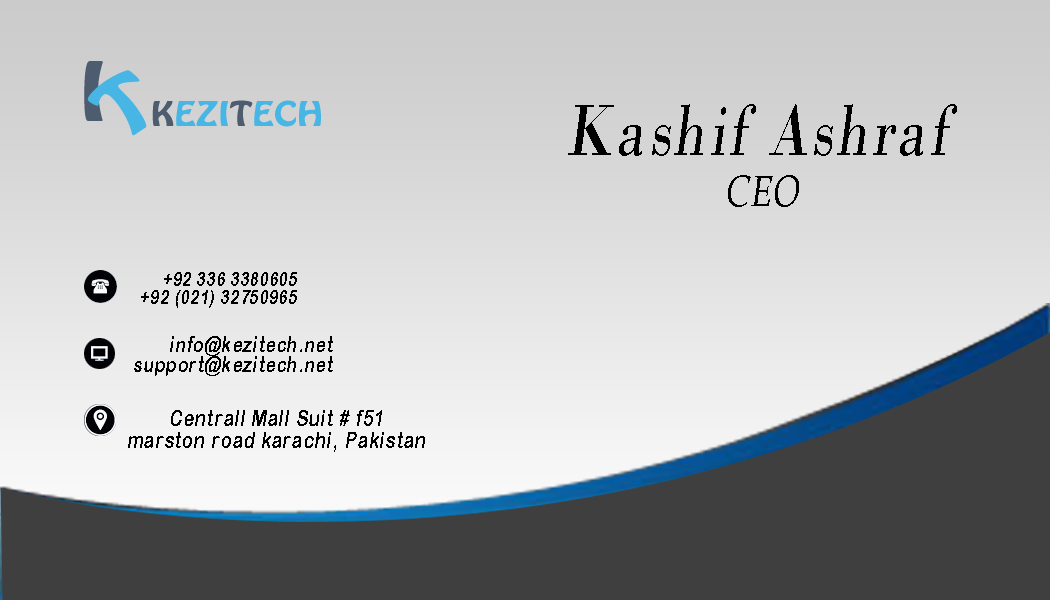
<style>
.page{position:relative;width:1050px;height:600px;background:#3f3f3f}
.page>*{position:absolute;margin:0}
.t1{font:75.8px "BodoniMT";letter-spacing:0.05em;color:#000000;font-style:italic;scale:0.77 1}
.t2{font:43.3px "BookAntiqua";letter-spacing:0.05em;color:#000000;font-style:italic;scale:0.77 1}
.t3{font:20.1px "ArialRoundedMTBold";letter-spacing:0.05em;color:#000000;font-style:italic;scale:0.77 1}
.t4{font:22.1px "ArialRoundedMTBold";letter-spacing:0.05em;color:#000000;font-style:italic;scale:0.77 1}
.t5{font:23.4px "ArialRoundedMTBold";letter-spacing:0.05em;color:#000000;font-style:italic;scale:0.77 1}
</style>
<div class="page">
<p class="t1" style="left:568px;top:104px;width:389px;height:52px">Kashif Ashraf</p>
<p class="t2" style="left:728px;top:175px;width:71px;height:32px">CEO</p>
<p class="t3" style="left:141px;top:272px;width:156px;height:36px;text-align:right">+92 336 3380605<br>+92 (021) 32750965</p>
<p class="t4" style="left:134px;top:336px;width:199px;height:40px;text-align:right">info@kezitech.net<br>support@kezitech.net</p>
<p class="t5" style="left:128px;top:410px;width:297px;height:42px;text-align:center">Centrall Mall Suit # f51<br>marston road karachi, Pakistan</p>
</div>
